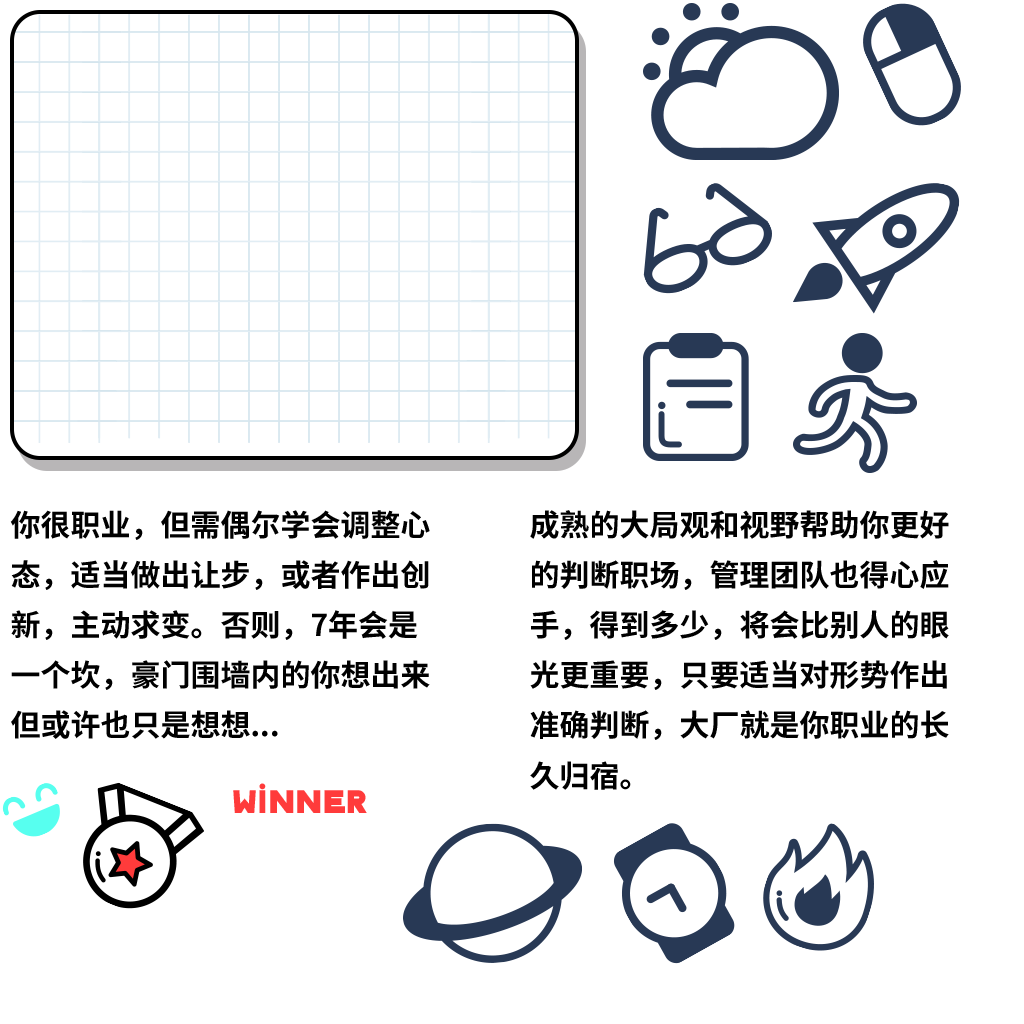
<style>
.page{position:relative;width:1024px;height:1024px;background:#ffffff}
.page>*{position:absolute;margin:0}
.t1{font:30px/50.2px "SourceHanSansCN-Bold";color:#000000}
.t2{font:45.7px "ClassiqueSaigon";color:#ff3b3b}
</style>
<div class="page">
<p class="t1" style="left:10px;top:510px;width:420px;height:229px">你很职业，但需偶尔学会调整心态，适当做出让步，或者作出创新，主动求变。否则，7年会是一个坎，豪门围墙内的你想出来但或许也只是想想...</p>
<p class="t1" style="left:530px;top:510px;width:419px;height:280px">成熟的大局观和视野帮助你更好的判断职场，管理团队也得心应手，得到多少，将会比别人的眼光更重要，只要适当对形势作出准确判断，大厂就是你职业的长久归宿。</p>
<p class="t2" style="left:233px;top:783px;width:134px;height:30px">winner</p>
</div>
